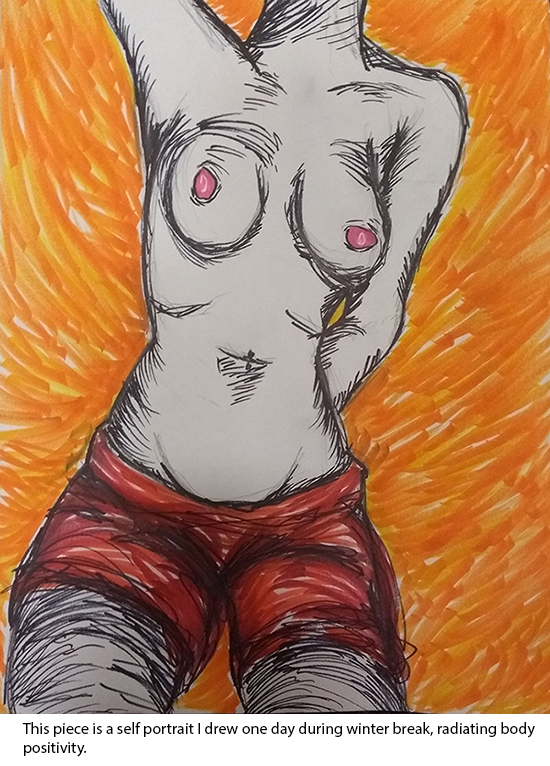
<style>
.page{position:relative;width:550px;height:766px}
.page>*{position:absolute;margin:0}
.t1{font:16px "MyriadPro-Regular";color:#000000}
</style>
<div class="page">
<p class="t1" style="left:22px;top:722px;width:513px;height:35px">This piece is a self portrait I drew one day during winter break, radiating body positivity.</p>
</div>
